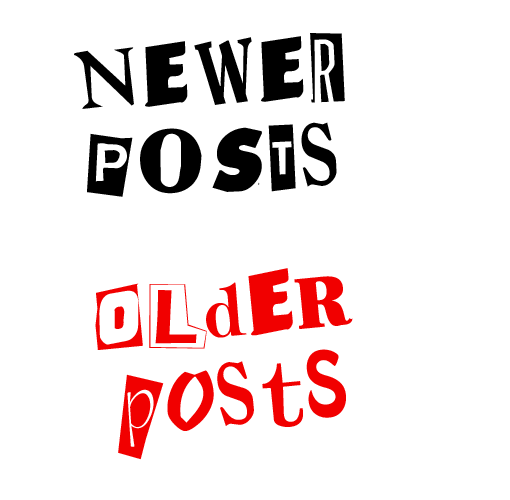
<style>
.page{position:relative;width:510px;height:500px;background:#ffffff}
.page>*{position:absolute;margin:0}
.t1{font:72px "Demand";color:#000000}
.t2{font:72px "RansomNote";color:#f10000}
.t3{font:72px "Demand";color:#f10000}
</style>
<div class="page">
<p class="t1" style="left:74px;top:33px;width:271px;height:164px;text-align:center;rotate:-3deg">newer<br>posTS</p>
<p class="t2" style="left:95px;top:268px;width:258px;height:192px;text-align:center;rotate:-6deg"><span class="t3">O</span>Ld<span class="t3">e</span>R<br>pO<span class="t3">St</span>S</p>
</div>
